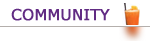
<style>
.page{position:relative;width:150px;height:42px;background:#ffffff}
.page>*{position:absolute;margin:0}
.t1{font:15px "Verdana";color:#612b83;font-weight:bold}
</style>
<div class="page">
<p class="t1" style="left:11px;top:8px;width:99px;height:13px">COMMUNITY</p>
</div>
